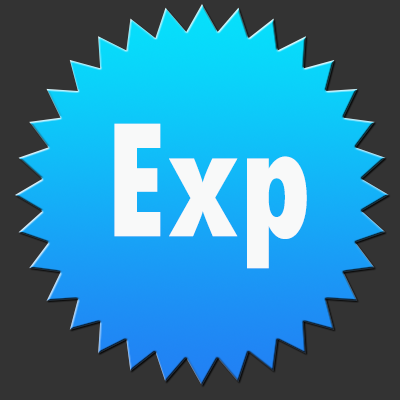
<style>
.page{position:relative;width:400px;height:400px;background:#333333}
.page>*{position:absolute;margin:0}
.t1{font:172.3px "TwCenMT-CondensedExtraBold";color:#f8f9f9;scale:0.88 1}
</style>
<div class="page">
<p class="t1" style="left:114px;top:123px;width:193px;height:146px">Exp</p>
</div>
